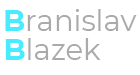
<style>
.page{position:relative;width:140px;height:75px;background:#ffffff}
.page>*{position:absolute;margin:0}
.t1{font:29.2px "Montserrat-Regular";color:#aaaaaa}
.t2{font:29.2px "Montserrat-Bold";color:#49ecff}
</style>
<div class="page">
<p class="t1" style="left:5px;top:9px;width:132px;height:22px"><span class="t2">B</span>ranislav</p>
<p class="t1" style="left:5px;top:38px;width:96px;height:22px"><span class="t2">B</span>lazek</p>
</div>
